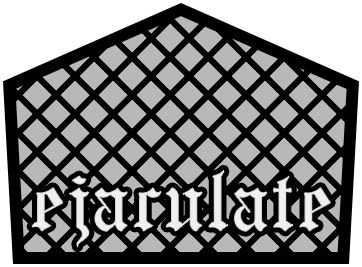
<style>
.page{position:relative;width:362px;height:267px;background:#b8b8b8}
.page>*{position:absolute;margin:0}
.t1{font:80px "Baxter";color:#f0f0f0}
</style>
<div class="page">
<p class="t1" style="left:32px;top:170px;width:298px;height:77px">ejaculate</p>
</div>
